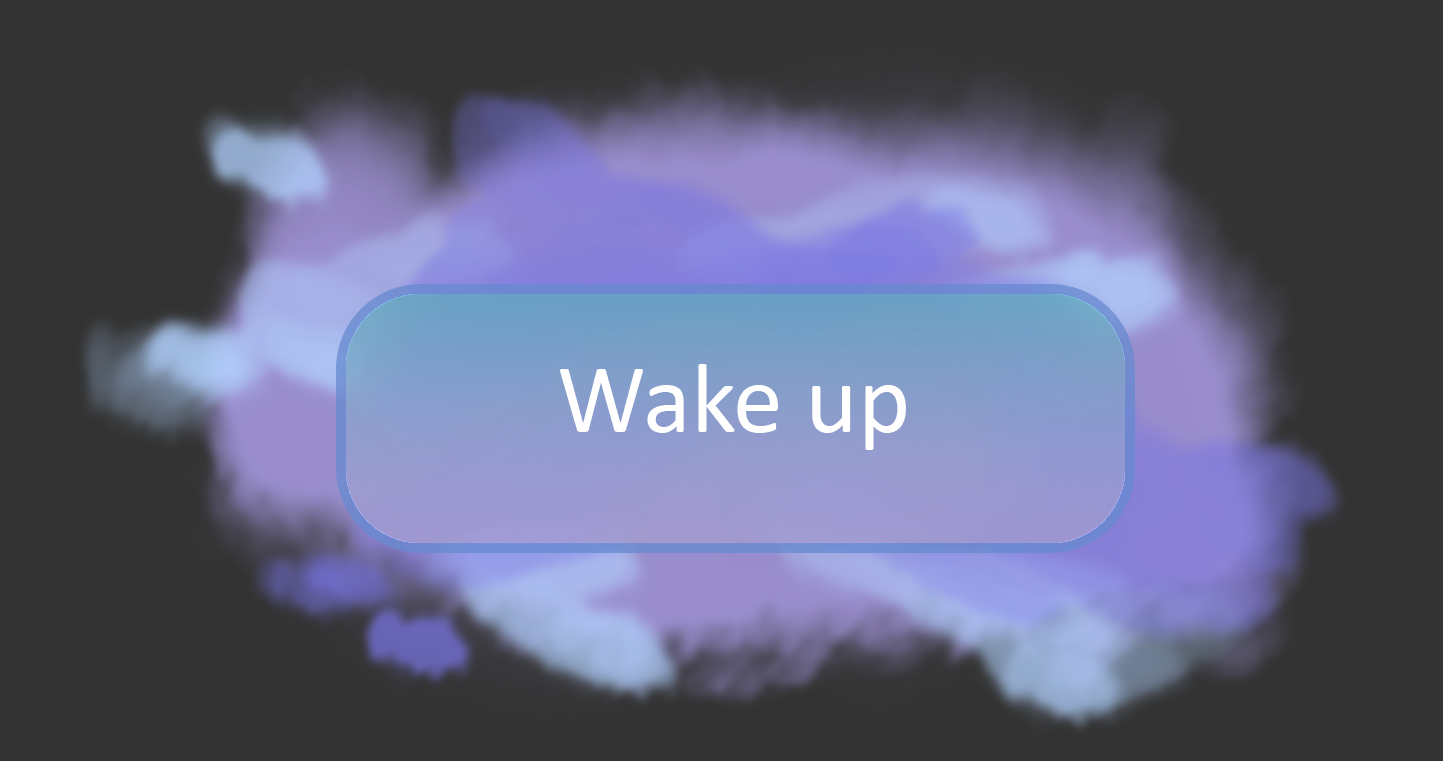
<style>
.page{position:relative;width:1443px;height:761px;background:#333333}
.page>*{position:absolute;margin:0}
.t1{font:100px "Calibri";color:#ffffff}
</style>
<div class="page">
<p class="t1" style="left:560px;top:364px;width:346px;height:86px">Wake up</p>
</div>
